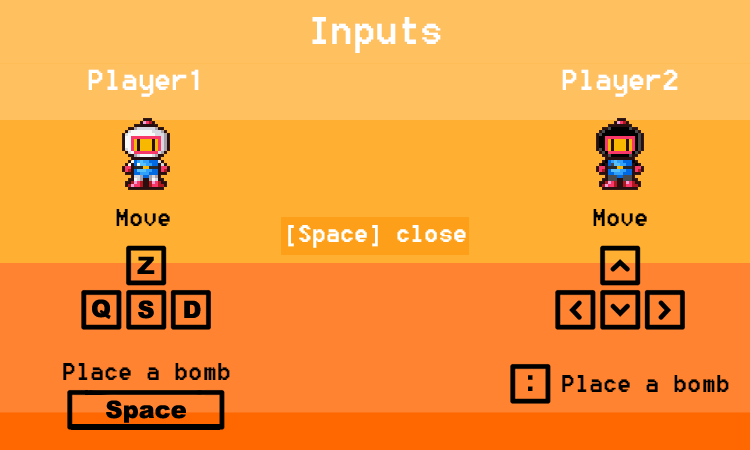
<style>
.page{position:relative;width:750px;height:450px;background:#ff8331}
.page>*{position:absolute;margin:0}
.t1{font:48px "8514oem";color:#ffffff}
.t2{font:36px "8514oem";color:#ffffff}
.t3{font:30px "8514oem";color:#000000}
</style>
<div class="page">
<p class="t1" style="left:312px;top:17px;width:129px;height:36px">Inputs</p>
<p class="t2" style="left:88px;top:69px;width:111px;height:28px">Player1</p>
<p class="t2" style="left:562px;top:69px;width:116px;height:28px">Player2</p>
<p class="t3" style="left:116px;top:209px;width:54px;height:17px">Move</p>
<p class="t3" style="left:593px;top:209px;width:54px;height:17px">Move</p>
<p class="t3" style="left:63px;top:363px;width:167px;height:17px">Place a bomb</p>
<p class="t3" style="left:562px;top:375px;width:167px;height:17px">Place a bomb</p>
</div>
